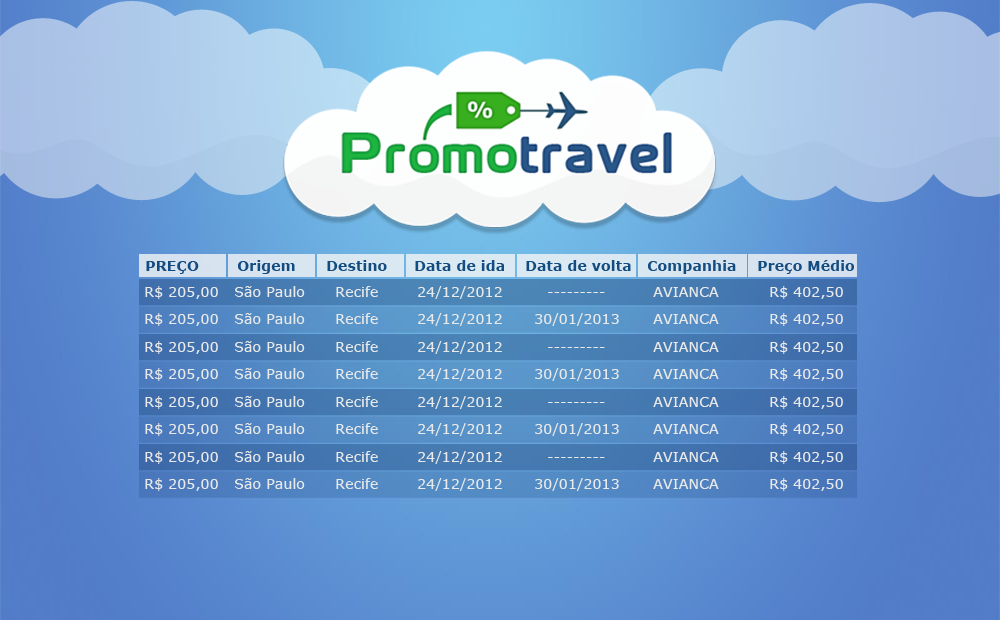
<style>
.page{position:relative;width:1000px;height:620px}
.page>*{position:absolute;margin:0}
.t1{font:14.3px "Verdana-Bold";color:#134c80}
.t2{font:14.3px "Verdana";color:#e9e9e9}
</style>
<div class="page">
<p class="t1" style="left:146px;top:261px;width:53px;height:13px">PREÇO</p>
<p class="t1" style="left:238px;top:260px;width:57px;height:14px">Origem</p>
<p class="t1" style="left:327px;top:260px;width:60px;height:11px">Destino</p>
<p class="t1" style="left:415px;top:260px;width:89px;height:11px">Data de ida</p>
<p class="t1" style="left:526px;top:260px;width:105px;height:11px">Data de volta</p>
<p class="t1" style="left:648px;top:260px;width:88px;height:14px">Companhia</p>
<p class="t1" style="left:758px;top:260px;width:96px;height:14px">Preço Médio</p>
<p class="t2" style="left:145px;top:286px;width:73px;height:13px">R$ 205,00</p>
<p class="t2" style="left:235px;top:286px;width:70px;height:11px">São Paulo</p>
<p class="t2" style="left:336px;top:286px;width:42px;height:11px">Recife</p>
<p class="t2" style="left:418px;top:286px;width:84px;height:13px">24/12/2012</p>
<p class="t2" style="left:548px;top:292px;width:57px;height:1px">---------</p>
<p class="t2" style="left:653px;top:287px;width:66px;height:10px">AVIANCA</p>
<p class="t2" style="left:770px;top:286px;width:73px;height:13px">R$ 402,50</p>
<p class="t2" style="left:145px;top:313px;width:73px;height:13px">R$ 205,00</p>
<p class="t2" style="left:235px;top:313px;width:70px;height:11px">São Paulo</p>
<p class="t2" style="left:336px;top:313px;width:42px;height:11px">Recife</p>
<p class="t2" style="left:418px;top:313px;width:84px;height:13px">24/12/2012</p>
<p class="t2" style="left:535px;top:313px;width:84px;height:13px">30/01/2013</p>
<p class="t2" style="left:653px;top:314px;width:66px;height:10px">AVIANCA</p>
<p class="t2" style="left:770px;top:313px;width:73px;height:13px">R$ 402,50</p>
<p class="t2" style="left:145px;top:341px;width:73px;height:13px">R$ 205,00</p>
<p class="t2" style="left:235px;top:341px;width:70px;height:11px">São Paulo</p>
<p class="t2" style="left:336px;top:341px;width:42px;height:11px">Recife</p>
<p class="t2" style="left:418px;top:341px;width:84px;height:13px">24/12/2012</p>
<p class="t2" style="left:653px;top:342px;width:66px;height:10px">AVIANCA</p>
<p class="t2" style="left:770px;top:341px;width:73px;height:13px">R$ 402,50</p>
<p class="t2" style="left:548px;top:347px;width:57px;height:1px">---------</p>
<p class="t2" style="left:145px;top:368px;width:73px;height:13px">R$ 205,00</p>
<p class="t2" style="left:235px;top:368px;width:70px;height:11px">São Paulo</p>
<p class="t2" style="left:336px;top:368px;width:42px;height:11px">Recife</p>
<p class="t2" style="left:418px;top:368px;width:84px;height:13px">24/12/2012</p>
<p class="t2" style="left:535px;top:368px;width:84px;height:13px">30/01/2013</p>
<p class="t2" style="left:653px;top:369px;width:66px;height:10px">AVIANCA</p>
<p class="t2" style="left:770px;top:368px;width:73px;height:13px">R$ 402,50</p>
<p class="t2" style="left:145px;top:396px;width:73px;height:13px">R$ 205,00</p>
<p class="t2" style="left:235px;top:396px;width:70px;height:11px">São Paulo</p>
<p class="t2" style="left:336px;top:396px;width:42px;height:11px">Recife</p>
<p class="t2" style="left:418px;top:396px;width:84px;height:13px">24/12/2012</p>
<p class="t2" style="left:653px;top:397px;width:66px;height:10px">AVIANCA</p>
<p class="t2" style="left:770px;top:396px;width:73px;height:13px">R$ 402,50</p>
<p class="t2" style="left:548px;top:402px;width:57px;height:1px">---------</p>
<p class="t2" style="left:145px;top:423px;width:73px;height:13px">R$ 205,00</p>
<p class="t2" style="left:235px;top:423px;width:70px;height:11px">São Paulo</p>
<p class="t2" style="left:336px;top:423px;width:42px;height:11px">Recife</p>
<p class="t2" style="left:418px;top:423px;width:84px;height:13px">24/12/2012</p>
<p class="t2" style="left:535px;top:423px;width:84px;height:13px">30/01/2013</p>
<p class="t2" style="left:653px;top:424px;width:66px;height:10px">AVIANCA</p>
<p class="t2" style="left:770px;top:423px;width:73px;height:13px">R$ 402,50</p>
<p class="t2" style="left:145px;top:451px;width:73px;height:13px">R$ 205,00</p>
<p class="t2" style="left:235px;top:451px;width:70px;height:11px">São Paulo</p>
<p class="t2" style="left:336px;top:451px;width:42px;height:11px">Recife</p>
<p class="t2" style="left:418px;top:451px;width:84px;height:13px">24/12/2012</p>
<p class="t2" style="left:548px;top:457px;width:57px;height:1px">---------</p>
<p class="t2" style="left:653px;top:452px;width:66px;height:10px">AVIANCA</p>
<p class="t2" style="left:770px;top:451px;width:73px;height:13px">R$ 402,50</p>
<p class="t2" style="left:145px;top:478px;width:73px;height:13px">R$ 205,00</p>
<p class="t2" style="left:235px;top:478px;width:70px;height:11px">São Paulo</p>
<p class="t2" style="left:336px;top:478px;width:42px;height:11px">Recife</p>
<p class="t2" style="left:418px;top:478px;width:84px;height:13px">24/12/2012</p>
<p class="t2" style="left:535px;top:478px;width:84px;height:13px">30/01/2013</p>
<p class="t2" style="left:653px;top:479px;width:66px;height:10px">AVIANCA</p>
<p class="t2" style="left:770px;top:478px;width:73px;height:13px">R$ 402,50</p>
</div>
